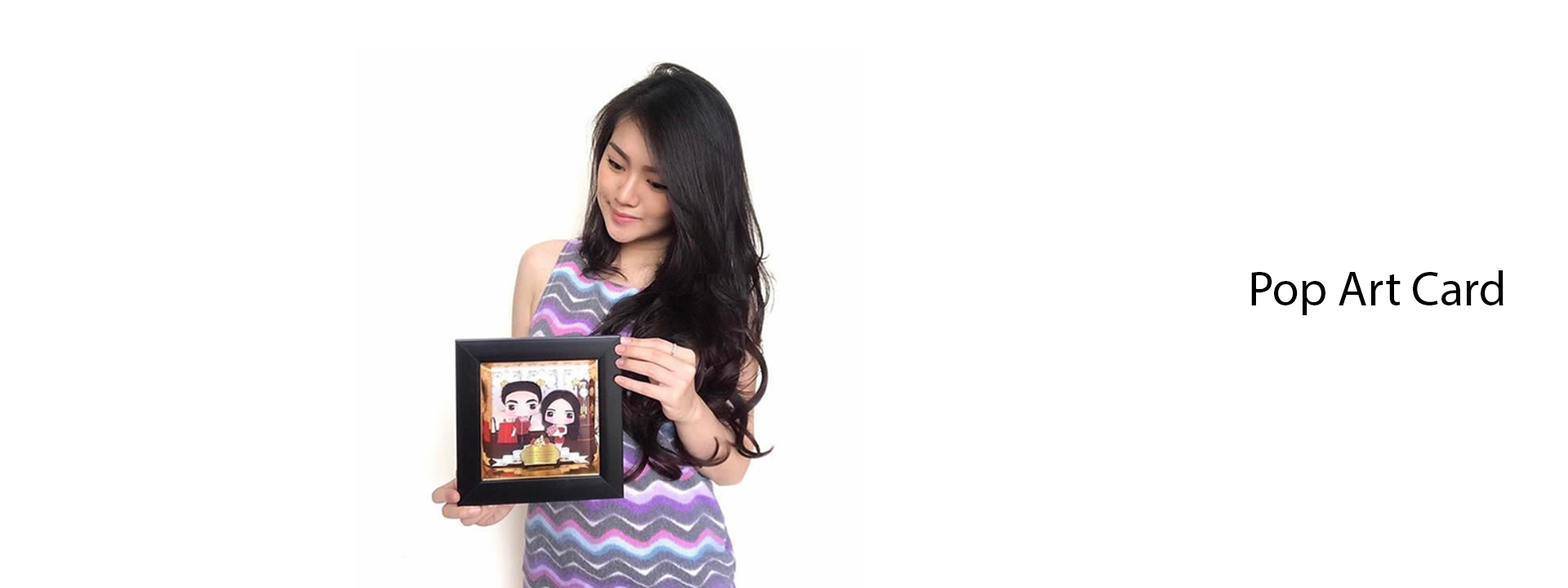
<style>
.page{position:relative;width:1568px;height:588px;background:#ffffff}
.page>*{position:absolute;margin:0}
.t1{font:49px "MyriadPro-Regular";color:#000000}
</style>
<div class="page">
<p class="t1" style="left:1251px;top:270px;width:252px;height:45px">Pop Art Card</p>
</div>
